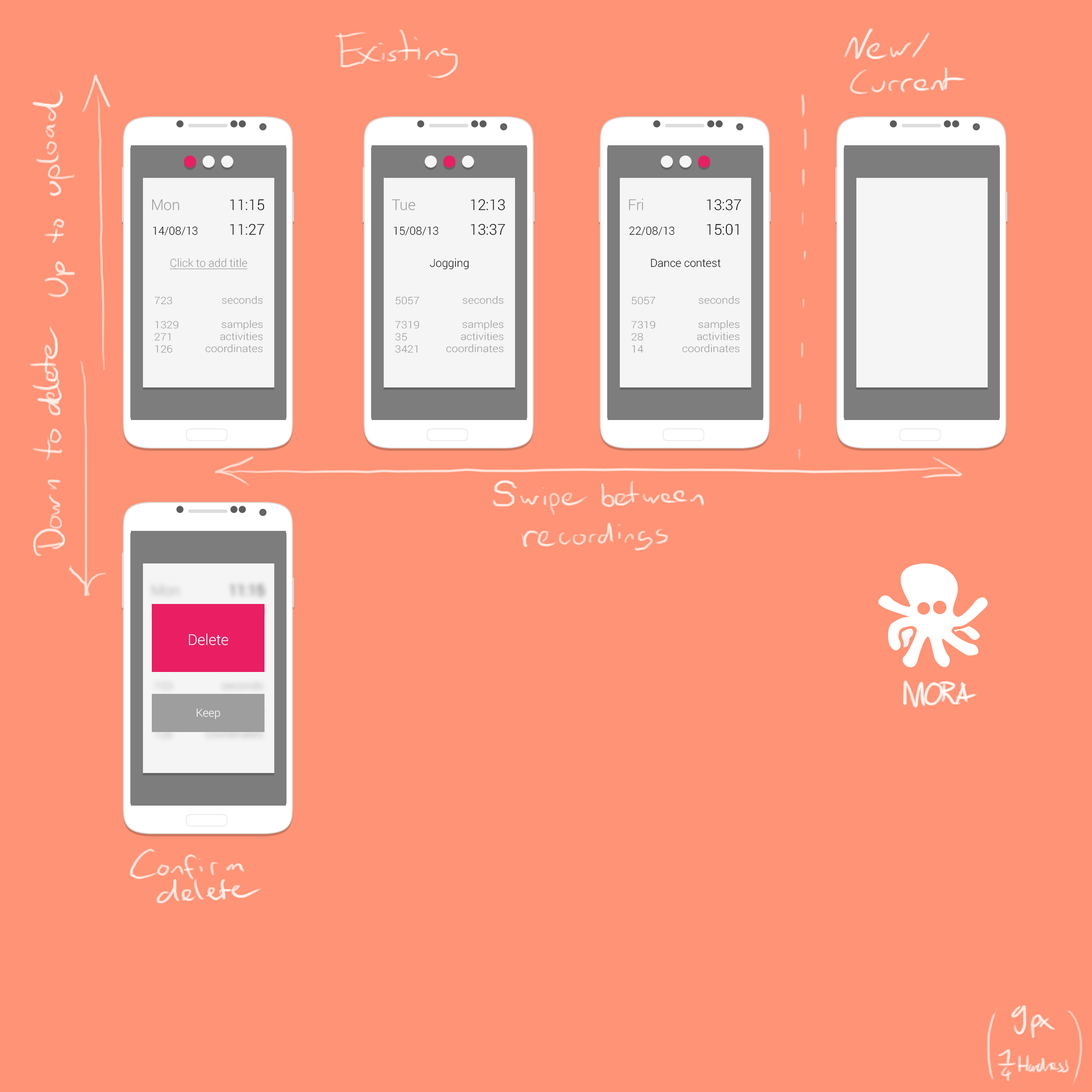
<style>
.page{position:relative;width:1092px;height:1092px;background:#fe9375}
.page>*{position:absolute;margin:0}
.t1{font:14.9px "Roboto-Light";color:#999999}
.t2{font:14.9px "Roboto-Light";color:#000000}
.t3{font:11.2px "Roboto-Light";color:#000000}
.t4{font:11.2px "Roboto-Light";color:#999999;text-decoration:underline}
.t5{font:11.2px "Roboto-Light";color:#010101}
.t6{font:10px "Roboto-Light";color:#999999;scale:1.11 1}
.t7{font:10.1px "Roboto-Light";color:#999999;scale:1.1 1}
.t8{font:14.9px "Roboto-Light";color:#ffffff}
.t9{font:11.2px "Roboto-Light";color:#ffffff}
</style>
<div class="page">
<p class="t1" style="left:152px;top:199px;width:27px;height:11px">Mon</p>
<p class="t2" style="left:230px;top:199px;width:34px;height:11px">11:15</p>
<p class="t1" style="left:392px;top:199px;width:23px;height:11px">Tue</p>
<p class="t2" style="left:471px;top:199px;width:34px;height:11px">12:13</p>
<p class="t1" style="left:629px;top:198px;width:14px;height:12px">Fri</p>
<p class="t2" style="left:707px;top:199px;width:34px;height:11px">13:37</p>
<p class="t3" style="left:153px;top:226px;width:44px;height:10px">14/08/13</p>
<p class="t2" style="left:230px;top:224px;width:34px;height:11px">11:27</p>
<p class="t3" style="left:393px;top:226px;width:45px;height:10px">15/08/13</p>
<p class="t2" style="left:471px;top:224px;width:34px;height:11px">13:37</p>
<p class="t3" style="left:629px;top:226px;width:45px;height:10px">22/08/13</p>
<p class="t2" style="left:707px;top:224px;width:32px;height:11px">15:01</p>
<p class="t4" style="left:170px;top:258px;width:78px;height:11px">Click to add title</p>
<p class="t5" style="left:430px;top:258px;width:39px;height:12px">Jogging</p>
<p class="t3" style="left:651px;top:258px;width:70px;height:9px">Dance contest</p>
<p class="t6" style="left:155px;top:297px;width:23px;height:56px">723<br><br>1329<br>271<br>126</p>
<p class="t7" style="left:205px;top:296px;width:58px;height:57px;text-align:right">seconds<br><br>samples<br>activities<br>coordinates</p>
<p class="t6" style="left:395px;top:297px;width:25px;height:56px">5057<br><br>7319<br>35<br>3421</p>
<p class="t7" style="left:446px;top:296px;width:57px;height:57px;text-align:right">seconds<br><br>samples<br>activities<br>coordinates</p>
<p class="t6" style="left:631px;top:297px;width:25px;height:56px">5057<br><br>7319<br>28<br>14</p>
<p class="t7" style="left:682px;top:296px;width:57px;height:57px;text-align:right">seconds<br><br>samples<br>activities<br>coordinates</p>
<p class="t8" style="left:189px;top:633px;width:39px;height:12px">Delete</p>
<p class="t9" style="left:197px;top:708px;width:23px;height:11px">Keep</p>
</div>
